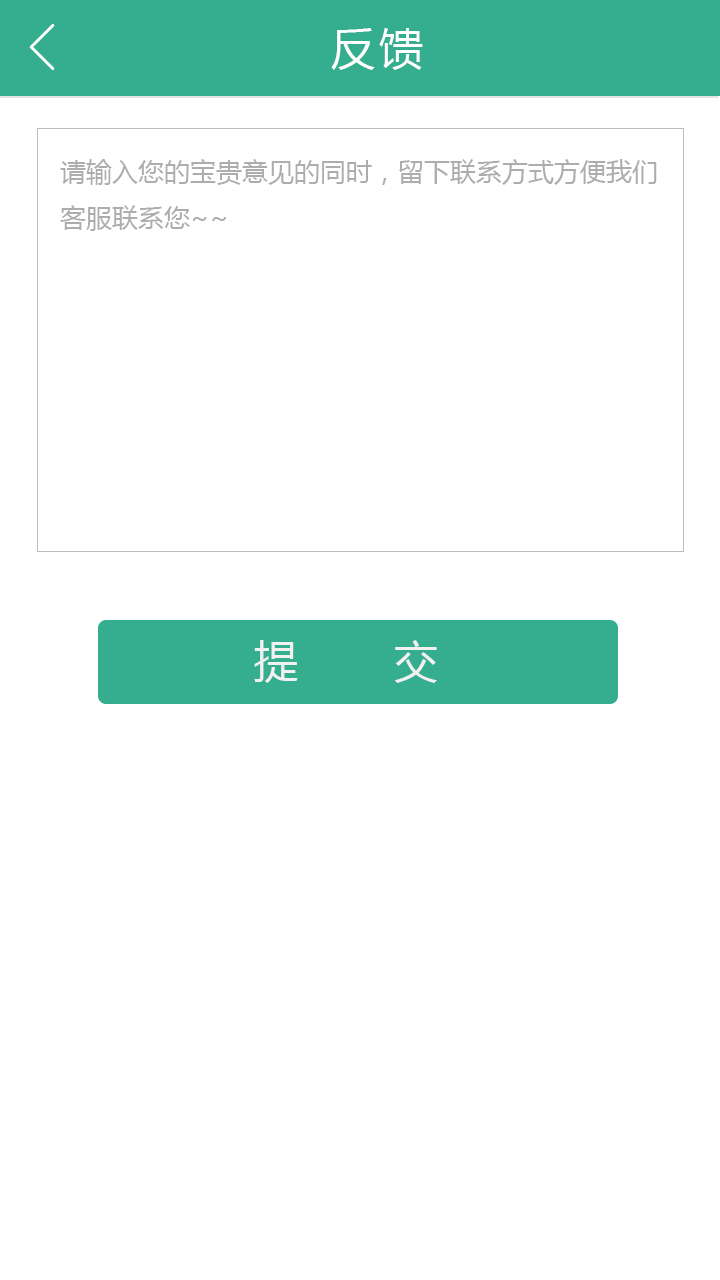
<style>
.page{position:relative;width:720px;height:1280px;background:#ffffff}
.page>*{position:absolute;margin:0}
.t1{font:44px "MicrosoftYaHei";letter-spacing:0.1em;color:#ffffff}
.t2{font:26px "MicrosoftYaHei";color:#acacac}
.t3{font:44px "MicrosoftYaHei";letter-spacing:0.2em;color:#f1f1f1}
</style>
<div class="page">
<p class="t1" style="left:331px;top:28px;width:92px;height:42px">反馈</p>
<p class="t2" style="left:60px;top:159px;width:597px;height:72px">请输入您的宝贵意见的同时，留下联系方式方便我们<br>客服联系您~~</p>
<p class="t3" style="left:254px;top:640px;width:183px;height:43px">提    交</p>
</div>
